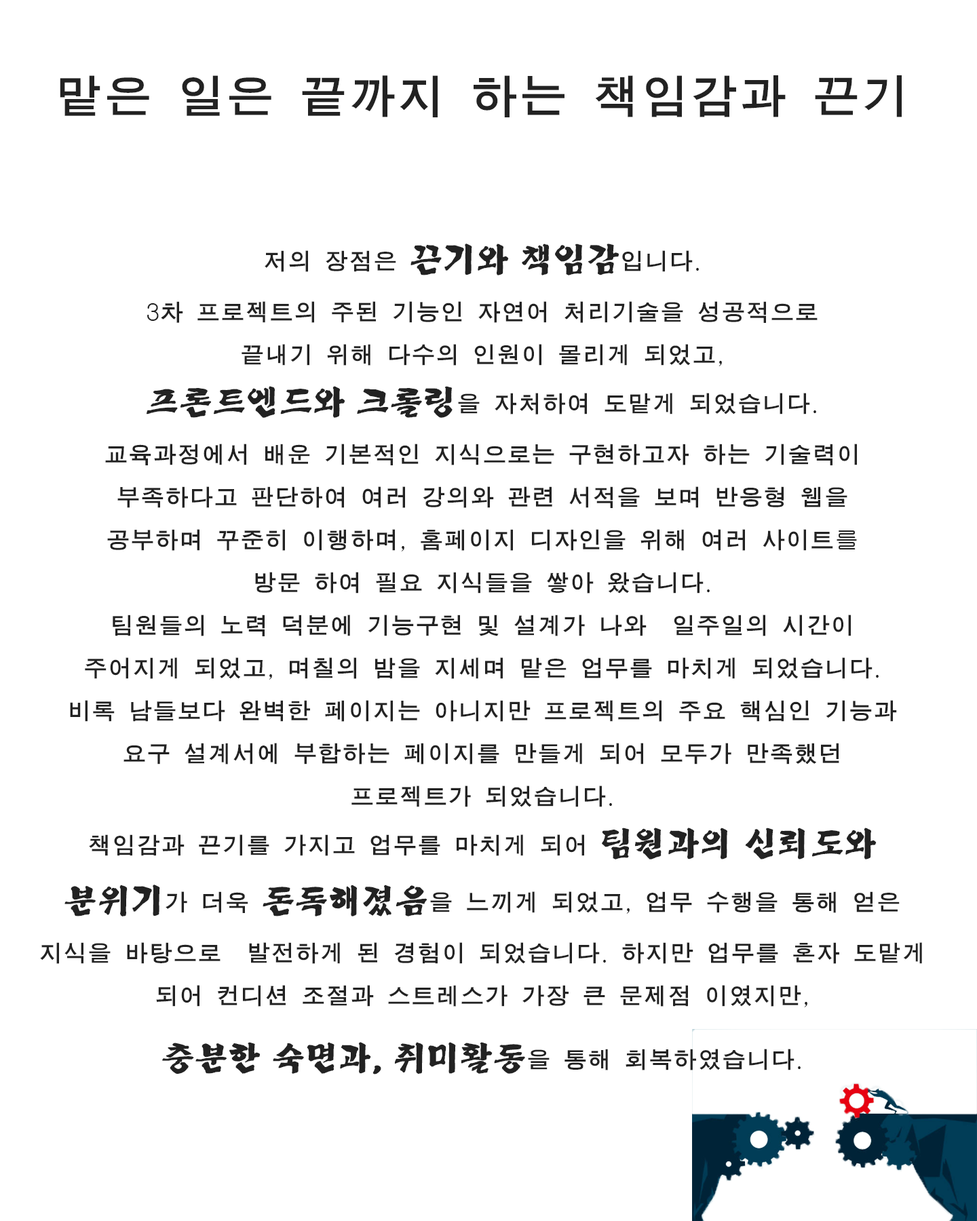
<style>
.page{position:relative;width:977px;height:1221px;background:#ffffff}
.page>*{position:absolute;margin:0}
.t1{font:24.4px "MJemokGothic";color:#222222}
.t2{font:16.3px "MJemokGothic";color:#222222}
.t3{font:48.8px "MJemokGothic";color:#222222}
.t4{font:32.6px "Yj-BACDOO-Bold";color:#222222}
.t5{font:24.4px "Gulim";color:#222222}
</style>
<div class="page">
<p class="t1" style="left:40px;top:75px;width:882px;height:999px;text-align:center"><span class="t2"><br></span><span class="t3">맡은 일은 끝까지 하는 책임감과 끈기 <br><br></span>저의 장점은 <span class="t4">끈기와 책임감</span>입니다<span class="t5">.<br>3</span>차 프로젝트의 주된 기능인 자연어 처리기술을 성공적으로 <br>끝내기 위해 다수의 인원이 몰리게 되었고<span class="t5">, <br></span><span class="t4">프론트엔드와 크롤링</span>을 자처하여 도맡게 되었습니다<span class="t5">.</span><br>교육과정에서 배운 기본적인 지식으로는 구현하고자 하는 기술력이 <br>부족하다고 판단하여 여러 강의와 관련 서적을 보며 반응형 웹을 <br>공부하며 꾸준히 이행하며<span class="t5">,</span> 홈페이지 디자인을 위해 여러 사이트<span class="t5">를</span> <br>방문 하여 필요 지식들을 쌓아 왔습니다<span class="t5">.</span>    <br>팀원들의 노력 덕분에 기능구현 및 설계가 나와  일주일의 시간이 <br>주어지게 되었고<span class="t5">,</span> 며칠의 밤을 지세며 맡은 업무를 마치게 되었습니다<span class="t5">.</span>  <br>비록 남들보다 완벽한 페이지는 아니지만 프로젝트의 주요 핵심인 기능과 <br>요구 설계서에 부합하는 페이지를 만들게 되어 모두가 만족했던<br>프로젝트가 되었습니다<span class="t5">.<br></span>책임감과 끈기를 가지고 업무를 마치게 되어 <span class="t4">팀원과의 신뢰도와 분위기</span>가 더욱 <span class="t4">돈독해졌음</span>을 느끼게 되었고<span class="t5">,</span> 업무 수행을 통해 얻은 지식을 바탕으로  발전하게 된 경험이 되었습니다<span class="t5">.</span> 하지만 업무를 혼자 도맡게 되어 컨디션 조절과 스트레스가 가장 큰 문제점 이였지만<span class="t5">, <br></span><span class="t4">충분한 숙면과, 취미활동</span>을 통해 회복하였습니다<span class="t5">.</span></p>
</div>
